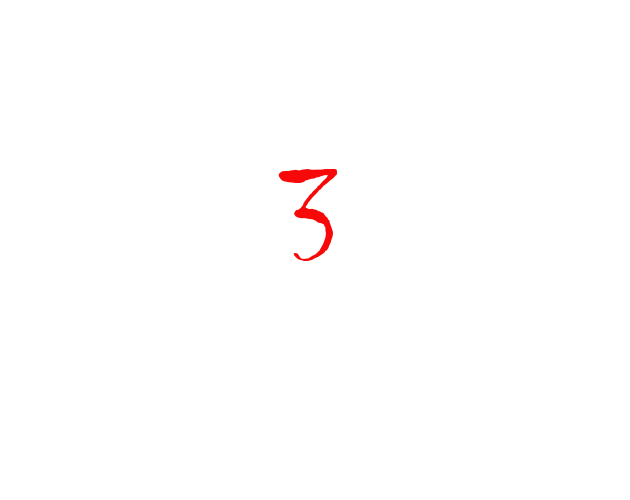
<style>
.page{position:relative;width:630px;height:500px;background:#ffffff}
.page>*{position:absolute;margin:0}
.t1{font:138.9px "Chiller-Regular";color:#f80909}
</style>
<div class="page">
<p class="t1" style="left:278px;top:169px;width:59px;height:92px">3</p>
</div>
